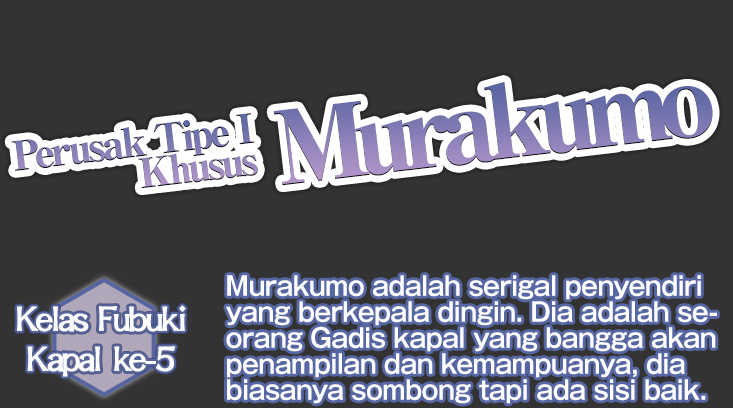
<style>
.page{position:relative;width:733px;height:408px;background:#333333}
.page>*{position:absolute;margin:0}
.t1{font:26px/26px "GothicMB101Pro-DeBold";letter-spacing:-0.02em;color:#fdfdfd;scale:0.95 1}
.t2{font:40px/40px "DFLungMen-W9-WINP-BF";letter-spacing:-0.09em;color:#fdfdfd;font-weight:bold}
</style>
<div class="page">
<p class="t1" style="left:226px;top:275px;width:491px;height:129px">Murakumo adalah serigal penyendiri<br>yang berkepala dingin. Dia adalah se-<br>orang Gadis kapal yang bangga akan<br>penampilan dan kemampuanya, dia<br>biasanya sombong tapi ada sisi baik.</p>
<p class="t2" style="left:17px;top:305px;width:169px;height:72px;text-align:center">Kelas Fubuki<br>Kapal ke-5</p>
</div>
